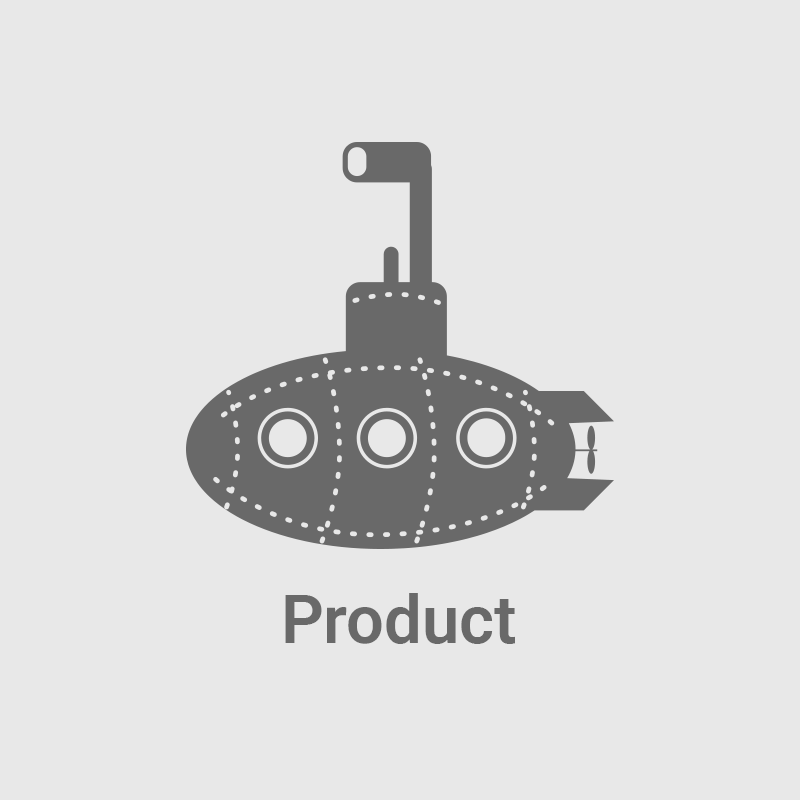
<style>
.page{position:relative;width:800px;height:800px;background:#e8e8e8}
.page>*{position:absolute;margin:0}
.t1{font:66.7px "Roboto-SemiBold";color:#696969}
</style>
<div class="page">
<p class="t1" style="left:285px;top:593px;width:230px;height:51px">Product</p>
</div>
